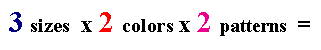
<style>
.page{position:relative;width:321px;height:50px;background:#ffffff}
.page>*{position:absolute;margin:0}
.t1{font:19px "TimesNewRomanPS-BoldMT";color:#000000}
.t2{font:30px "TimesNewRomanPS-BoldMT";color:#000082}
.t3{font:20px "TimesNewRomanPS-BoldMT";color:#000000}
.t4{font:24px "TimesNewRomanPS-BoldMT";color:#000000}
.t5{font:30px "TimesNewRomanPS-BoldMT";color:#ff0000}
.t6{font:30px "TimesNewRomanPS-BoldMT";color:#ec008c}
</style>
<div class="page">
<p class="t1" style="left:9px;top:12px;width:301px;height:24px"><span class="t2">3 </span><span class="t3">sizes </span><span class="t4"> x </span><span class="t5">2 </span><span class="t3">colors </span><span class="t4">x </span><span class="t6">2 </span>patterns  <span class="t4">=</span></p>
</div>
